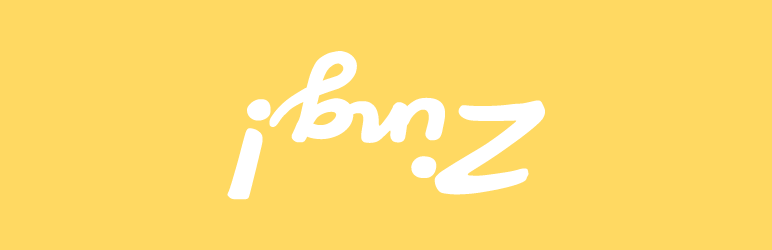
<style>
.page{position:relative;width:772px;height:250px;background:#ffd962}
.page>*{position:absolute;margin:0}
.t1{font:150px "Japan";letter-spacing:0.01em;color:#ffffff;font-style:italic}
</style>
<div class="page">
<p class="t1" style="left:227px;top:51px;width:318px;height:149px;rotate:180deg">Zing!</p>
</div>
